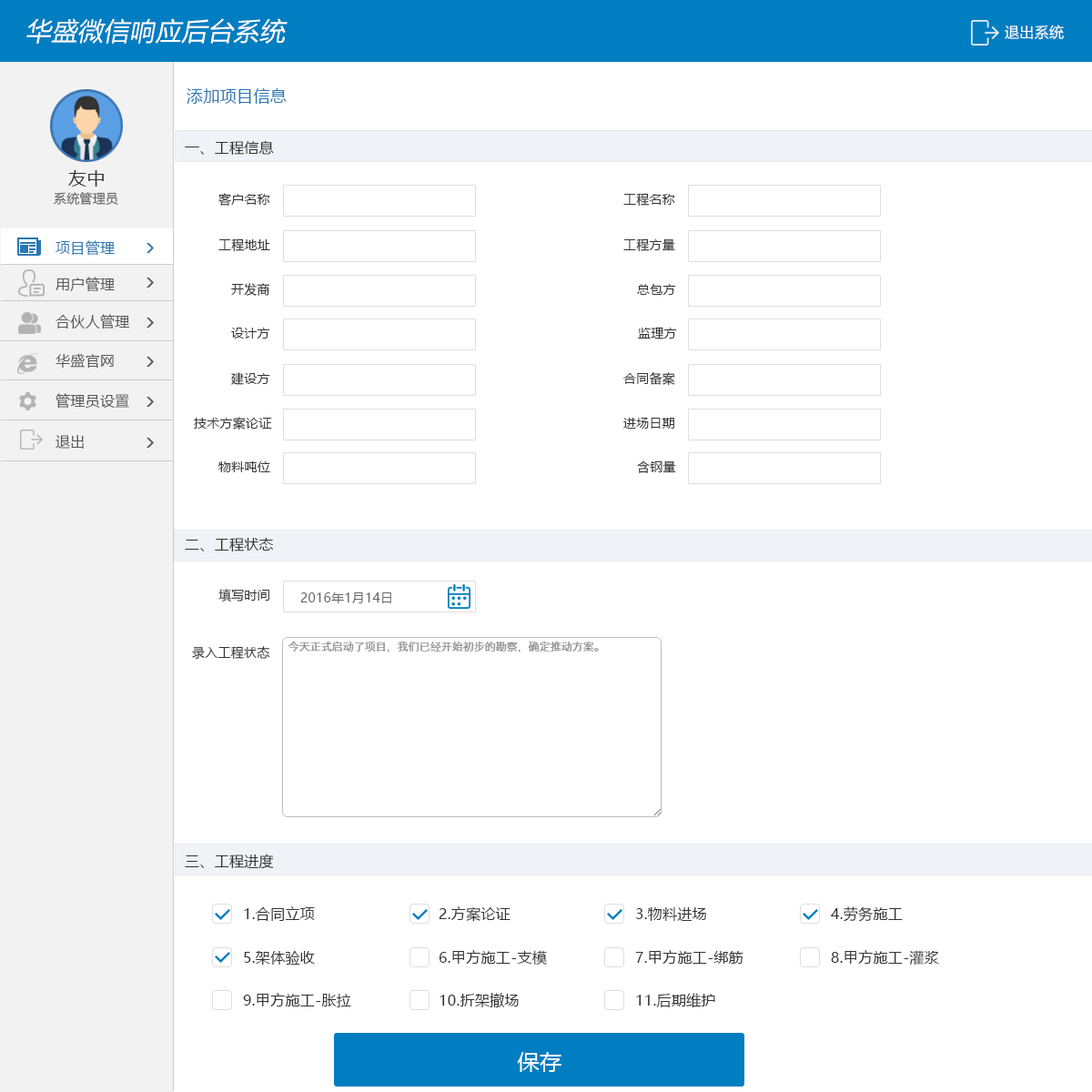
<style>
.page{position:relative;width:1092px;height:1092px;background:#ffffff}
.page>*{position:absolute;margin:0}
.t1{font:25.5px "MicrosoftYaHei";letter-spacing:0.02em;color:#ffffff;font-style:italic}
.t2{font:14.6px "MicrosoftYaHei";letter-spacing:0.02em;color:#ffffff}
.t3{font:16.4px "MicrosoftYaHei";letter-spacing:0.02em;color:#2977b3}
.t4{font:14.6px "MicrosoftYaHei";letter-spacing:0.02em;color:#333333}
.t5{font:18.2px "MicrosoftYaHei";letter-spacing:0.02em;color:#333333}
.t6{font:12.7px "MicrosoftYaHei";letter-spacing:0.02em;color:#666666}
.t7{font:12.7px "MicrosoftYaHei";letter-spacing:0.02em;color:#333333}
.t8{font:14.6px "MicrosoftYaHei";letter-spacing:0.02em;color:#2977b3}
.t9{font:14.6px "MicrosoftYaHei";letter-spacing:0.02em;color:#585858}
.t10{font:21.8px "MicrosoftYaHei";letter-spacing:0.02em;color:#ffffff}
</style>
<div class="page">
<p class="t1" style="left:26px;top:18px;width:262px;height:26px">华盛微信响应后台系统</p>
<p class="t2" style="left:1005px;top:25px;width:59px;height:15px">退出系统</p>
<p class="t3" style="left:187px;top:88px;width:100px;height:16px">添加项目信息</p>
<p class="t4" style="left:185px;top:140px;width:89px;height:16px">一、工程信息</p>
<p class="t5" style="left:68px;top:170px;width:36px;height:17px">友中</p>
<p class="t6" style="left:54px;top:192px;width:64px;height:14px">系统管理员</p>
<p class="t7" style="left:218px;top:193px;width:52px;height:13px">客户名称</p>
<p class="t7" style="left:623px;top:193px;width:52px;height:14px">工程名称</p>
<p class="t8" style="left:56px;top:240px;width:59px;height:15px">项目管理</p>
<p class="t7" style="left:218px;top:238px;width:52px;height:14px">工程地址</p>
<p class="t7" style="left:623px;top:238px;width:52px;height:14px">工程方量</p>
<p class="t9" style="left:56px;top:277px;width:59px;height:14px">用户管理</p>
<p class="t7" style="left:231px;top:283px;width:39px;height:13px">开发商</p>
<p class="t7" style="left:637px;top:284px;width:39px;height:11px">总包方</p>
<p class="t9" style="left:56px;top:314px;width:74px;height:15px">合伙人管理</p>
<p class="t7" style="left:231px;top:328px;width:39px;height:11px">设计方</p>
<p class="t7" style="left:638px;top:327px;width:39px;height:12px">监理方</p>
<p class="t9" style="left:56px;top:353px;width:58px;height:15px">华盛官网</p>
<p class="t7" style="left:231px;top:372px;width:39px;height:13px">建设方</p>
<p class="t7" style="left:623px;top:372px;width:52px;height:14px">合同备案</p>
<p class="t9" style="left:56px;top:393px;width:73px;height:16px">管理员设置</p>
<p class="t7" style="left:194px;top:417px;width:78px;height:13px">技术方案论证</p>
<p class="t7" style="left:623px;top:418px;width:51px;height:11px">进场日期</p>
<p class="t9" style="left:56px;top:435px;width:28px;height:14px">退出</p>
<p class="t7" style="left:218px;top:461px;width:52px;height:11px">物料吨位</p>
<p class="t7" style="left:637px;top:460px;width:39px;height:13px">含钢量</p>
<p class="t4" style="left:185px;top:538px;width:89px;height:14px">二、工程状态</p>
<p class="t7" style="left:218px;top:589px;width:51px;height:13px">填写时间</p>
<p class="t6" style="left:300px;top:592px;width:91px;height:11px">2016年1月14日</p>
<p class="t7" style="left:192px;top:646px;width:78px;height:14px">录入工程状态</p>
<p class="t4" style="left:185px;top:854px;width:89px;height:15px">三、工程进度</p>
<p class="t4" style="left:244px;top:906px;width:71px;height:15px">1.合同立项</p>
<p class="t4" style="left:439px;top:906px;width:72px;height:16px">2.方案论证</p>
<p class="t4" style="left:636px;top:907px;width:70px;height:14px">3.物料进场</p>
<p class="t4" style="left:831px;top:906px;width:72px;height:16px">4.劳务施工</p>
<p class="t4" style="left:244px;top:951px;width:71px;height:14px">5.架体验收</p>
<p class="t4" style="left:439px;top:950px;width:108px;height:15px">6.甲方施工-支模</p>
<p class="t4" style="left:635px;top:950px;width:108px;height:14px">7.甲方施工-绑筋</p>
<p class="t4" style="left:831px;top:950px;width:108px;height:15px">8.甲方施工-灌浆</p>
<p class="t4" style="left:243px;top:993px;width:108px;height:14px">9.甲方施工-胀拉</p>
<p class="t4" style="left:440px;top:993px;width:79px;height:14px">10.折架撤场</p>
<p class="t4" style="left:636px;top:993px;width:79px;height:15px">11.后期维护</p>
<p class="t10" style="left:517px;top:1052px;width:44px;height:20px">保存</p>
</div>
